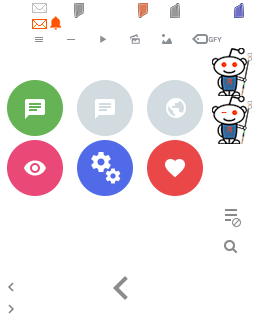
<style>
.page{position:relative;width:256px;height:320px;background:#ffffff}
.page>*{position:absolute;margin:0}
.t1{font:7px "Roboto-Bold";color:#8a8e95}
</style>
<div class="page">
<p class="t1" style="left:208px;top:37px;width:14px;height:5px">GFY</p>
</div>
